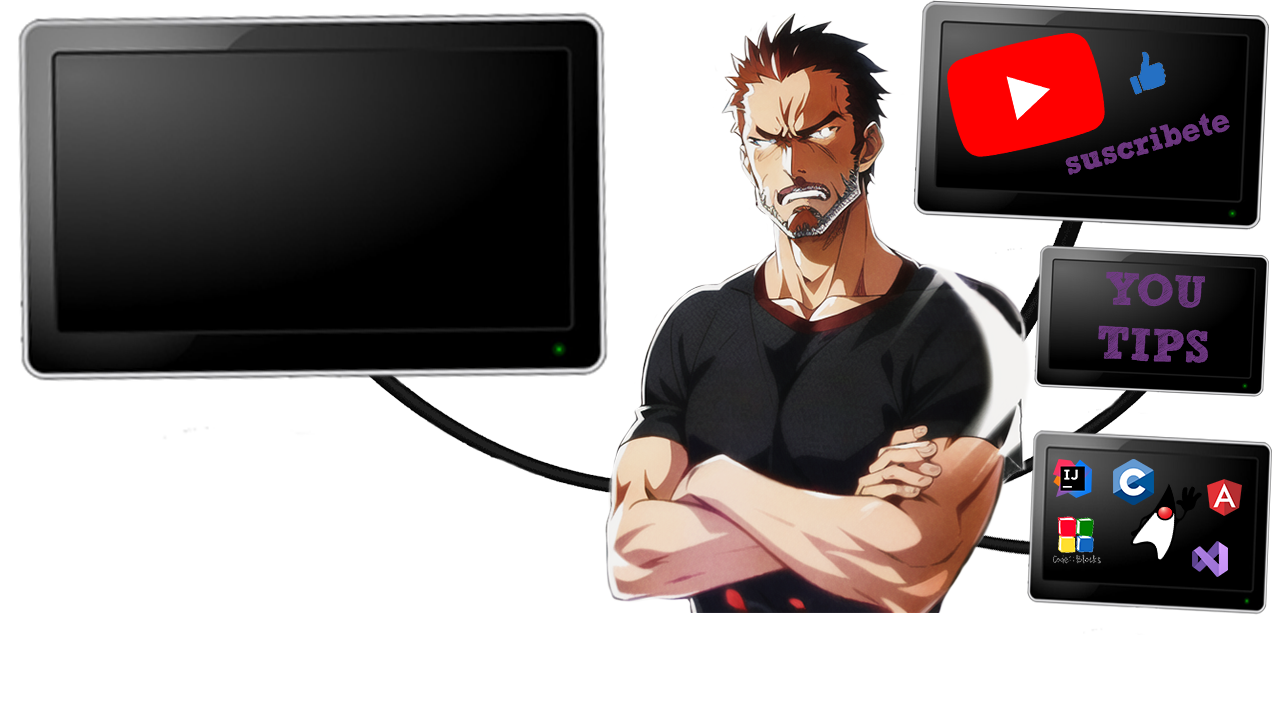
<style>
.page{position:relative;width:1280px;height:720px;background:#ffffff}
.page>*{position:absolute;margin:0}
.t1{font:32px "freeversionSketchBlock-Bold";color:#723a86}
.t2{font:45.6px "freeversionSketchBlock-Bold";color:#723a86}
</style>
<div class="page">
<p class="t1" style="left:1065px;top:113px;width:165px;height:62px;rotate:-16deg">suscribete</p>
<p class="t2" style="left:1098px;top:271px;width:110px;height:92px;text-align:center;rotate:2deg">YOU<br>TIPS</p>
</div>
